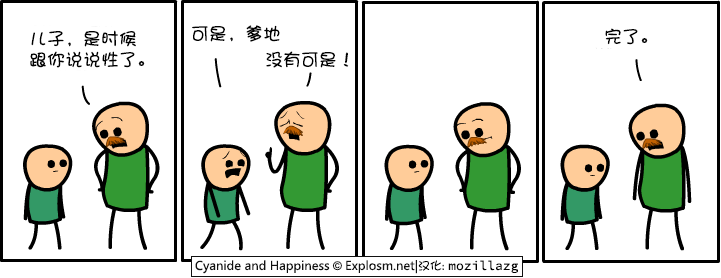
<style>
.page{position:relative;width:721px;height:278px;background:#ffffff}
.page>*{position:absolute;margin:0}
.t1{font:18px/21px "DFPShaoNvW5";color:#000000}
.t2{font:18px "DFPShaoNvW5";color:#000000}
</style>
<div class="page">
<p class="t1" style="left:30px;top:30px;width:115px;height:38px">儿子，是时候<br>跟你说说性了。</p>
<p class="t2" style="left:192px;top:25px;width:88px;height:17px">可是，爹地</p>
<p class="t2" style="left:605px;top:28px;width:43px;height:17px">完了。</p>
<p class="t2" style="left:266px;top:51px;width:83px;height:17px">没有可是！</p>
</div>
